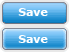
<style>
.page{position:relative;width:69px;height:52px}
.page>*{position:absolute;margin:0}
.t1{font:11px "Verdana-Bold";color:#ffffff}
</style>
<div class="page">
<p class="t1" style="left:18px;top:8px;width:30px;height:8px">Save</p>
<p class="t1" style="left:18px;top:35px;width:30px;height:8px">Save</p>
</div>
